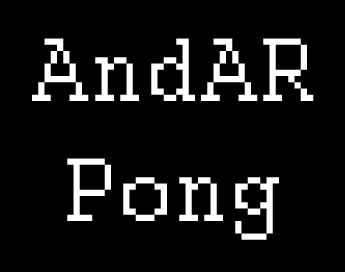
<style>
.page{position:relative;width:345px;height:272px;background:#000000}
.page>*{position:absolute;margin:0}
.t1{font:100px "Courier";color:#ffffff}
</style>
<div class="page">
<p class="t1" style="left:32px;top:38px;width:282px;height:202px;text-align:center">AndAR<br>Pong</p>
</div>
